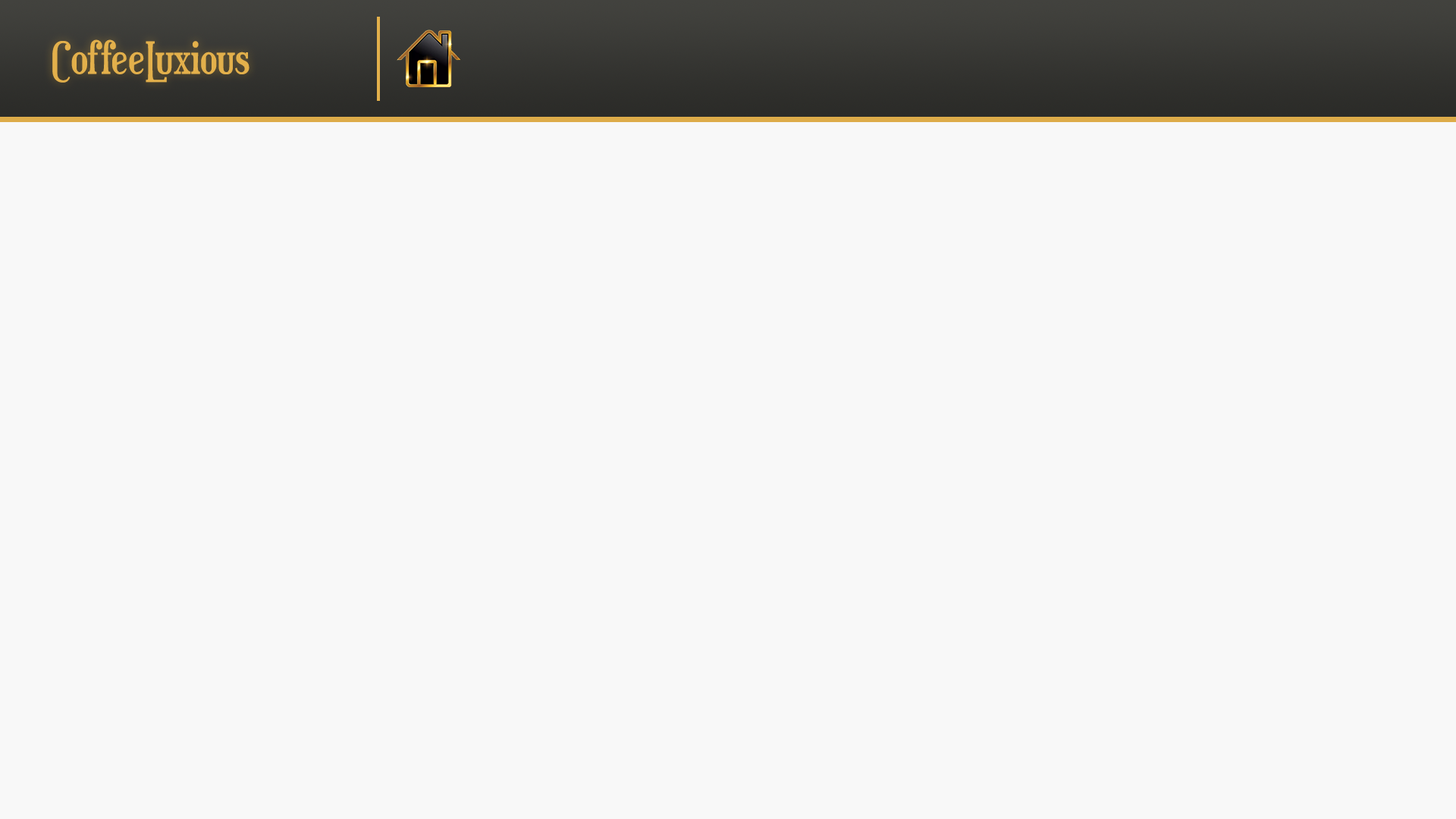
<style>
.page{position:relative;width:1456px;height:819px;background:#f8f8f8}
.page>*{position:absolute;margin:0}
.t1{font:47.4px "Euphorigenic";color:#e3b04b}
</style>
<div class="page">
<p class="t1" style="left:52px;top:39px;width:197px;height:44px">CoffeeLuxious</p>
</div>
